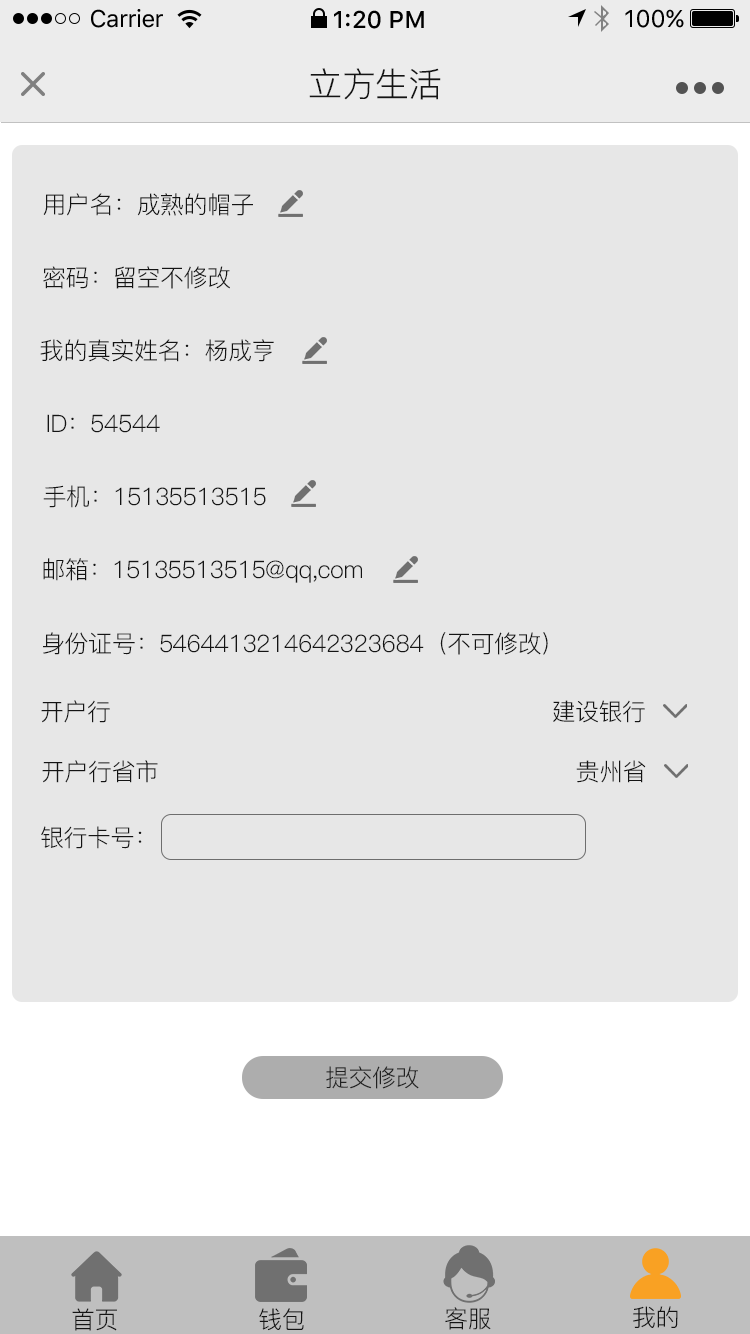
<style>
.page{position:relative;width:750px;height:1334px;background:#e7e7e7}
.page>*{position:absolute;margin:0}
.t1{font:24px "SFUIText-Regular";letter-spacing:-0.025em;color:#000000}
.t2{font:24px "SFUIText-Medium";color:#000000}
.t3{font:24px "SFUIText-Regular";color:#000000}
.t4{font:34px "PingFang-SC-Regular";letter-spacing:-0.02em;color:#141414}
.t5{font:24px "PingFang-SC-Regular";letter-spacing:-0.02em;color:#141414}
.t6{font:24px "PingFang-SC-Regular";letter-spacing:-0.024em;color:#212121}
</style>
<div class="page">
<p class="t1" style="left:91px;top:9px;width:72px;height:19px">Carrier</p>
<p class="t2" style="left:334px;top:10px;width:90px;height:19px">1:20 PM</p>
<p class="t3" style="left:625px;top:9px;width:59px;height:19px">100%</p>
<p class="t4" style="left:309px;top:68px;width:132px;height:32px">立方生活</p>
<p class="t5" style="left:43px;top:193px;width:210px;height:23px">用户名：成熟的帽子</p>
<p class="t5" style="left:43px;top:266px;width:187px;height:23px">密码：留空不修改</p>
<p class="t5" style="left:40px;top:339px;width:234px;height:23px">我的真实姓名：杨成亨</p>
<p class="t5" style="left:47px;top:414px;width:113px;height:19px">ID：54544</p>
<p class="t5" style="left:43px;top:485px;width:223px;height:23px">手机：15135513515</p>
<p class="t5" style="left:43px;top:558px;width:319px;height:25px">邮箱：15135513515@qq,com</p>
<p class="t5" style="left:43px;top:632px;width:505px;height:23px">身份证号：5464413214642323684（不可修改）</p>
<p class="t5" style="left:41px;top:700px;width:69px;height:23px">开户行</p>
<p class="t5" style="left:553px;top:700px;width:92px;height:23px">建设银行</p>
<p class="t5" style="left:42px;top:760px;width:116px;height:23px">开户行省市</p>
<p class="t5" style="left:576px;top:760px;width:70px;height:23px">贵州省</p>
<p class="t5" style="left:41px;top:826px;width:101px;height:23px">银行卡号：</p>
<p class="t6" style="left:326px;top:1066px;width:93px;height:23px">提交修改</p>
<p class="t5" style="left:72px;top:1308px;width:45px;height:23px">首页</p>
<p class="t5" style="left:259px;top:1308px;width:45px;height:23px">钱包</p>
<p class="t5" style="left:445px;top:1307px;width:46px;height:23px">客服</p>
<p class="t5" style="left:633px;top:1306px;width:45px;height:22px">我的</p>
</div>
